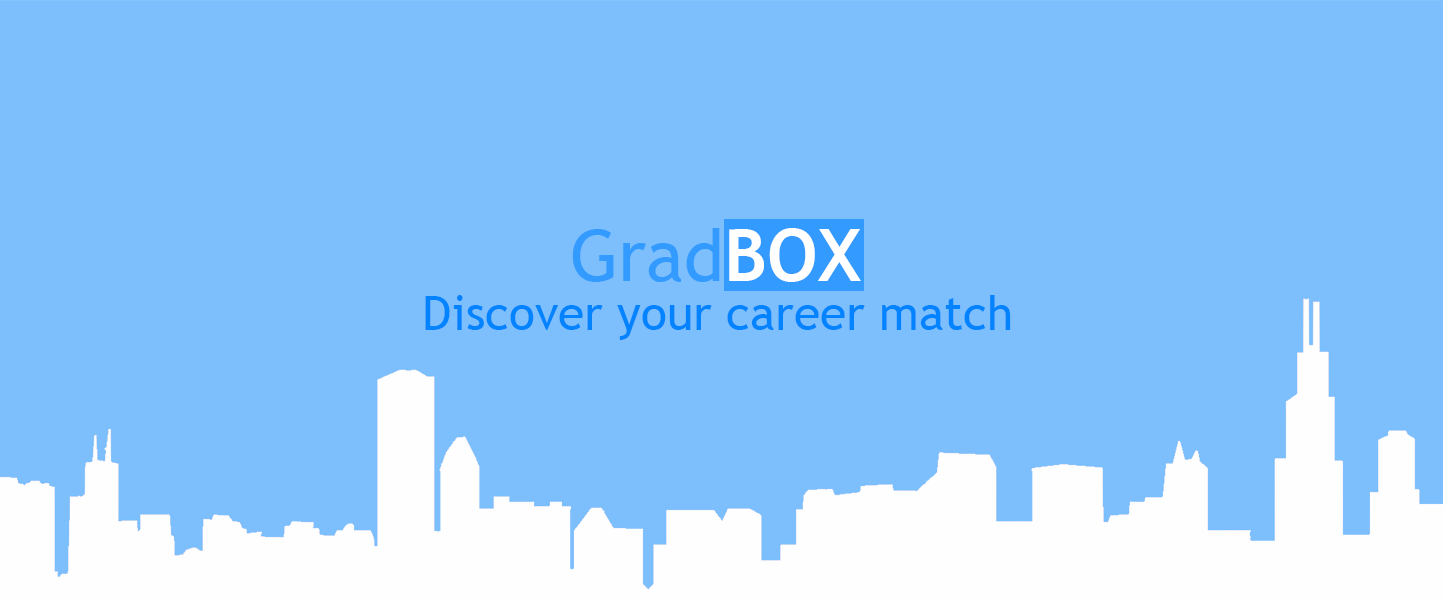
<style>
.page{position:relative;width:1443px;height:600px;background:#7dbefc}
.page>*{position:absolute;margin:0}
.t1{font:48px "TrebuchetMS";color:#0383ff}
</style>
<div class="page">
<p class="t1" style="left:425px;top:295px;width:586px;height:45px">Discover your career match</p>
</div>
